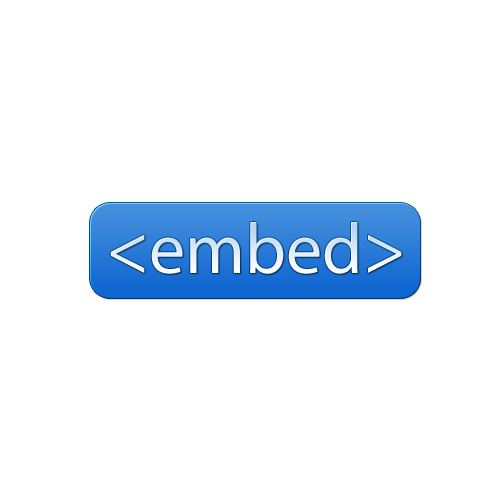
<style>
.page{position:relative;width:500px;height:500px;background:#ffffff}
.page>*{position:absolute;margin:0}
.t1{font:72px "MyriadPro-Regular"}
</style>
<div class="page">
<p class="t1" style="left:110px;top:222px;width:292px;height:52px">&lt;embed&gt;</p>
</div>
